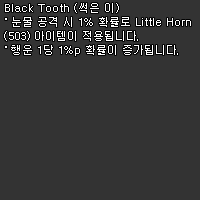
<style>
.page{position:relative;width:200px;height:200px;background:#333333}
.page>*{position:absolute;margin:0}
.t1{font:11px/14px "Dotum";color:#ffffff}
</style>
<div class="page">
<p class="t1" style="left:4px;top:3px;width:187px;height:53px">Black Tooth (썩은 이)<br>˚ 눈물 공격 시 1% 확률로 Little Horn<br>(503) 아이템이 적용됩니다.<br>˚ 행운 1당 1%p 확률이 증가됩니다.</p>
</div>
